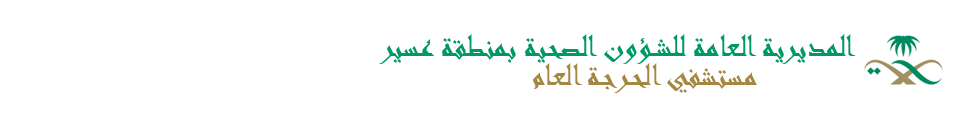
<style>
.page{position:relative;width:960px;height:116px;background:#ffffff}
.page>*{position:absolute;margin:0}
.t1{font:36px "Andalus";color:#009966}
.t2{font:36px "Andalus";color:#a48741}
</style>
<div class="page">
<p class="t1" style="left:379px;top:34px;width:477px;height:30px">المديرية العامة للشــؤون الصحية بمنطقة عسير</p>
<p class="t2" style="left:533px;top:63px;width:224px;height:30px">مستشفي الحـرجـة العام</p>
</div>
